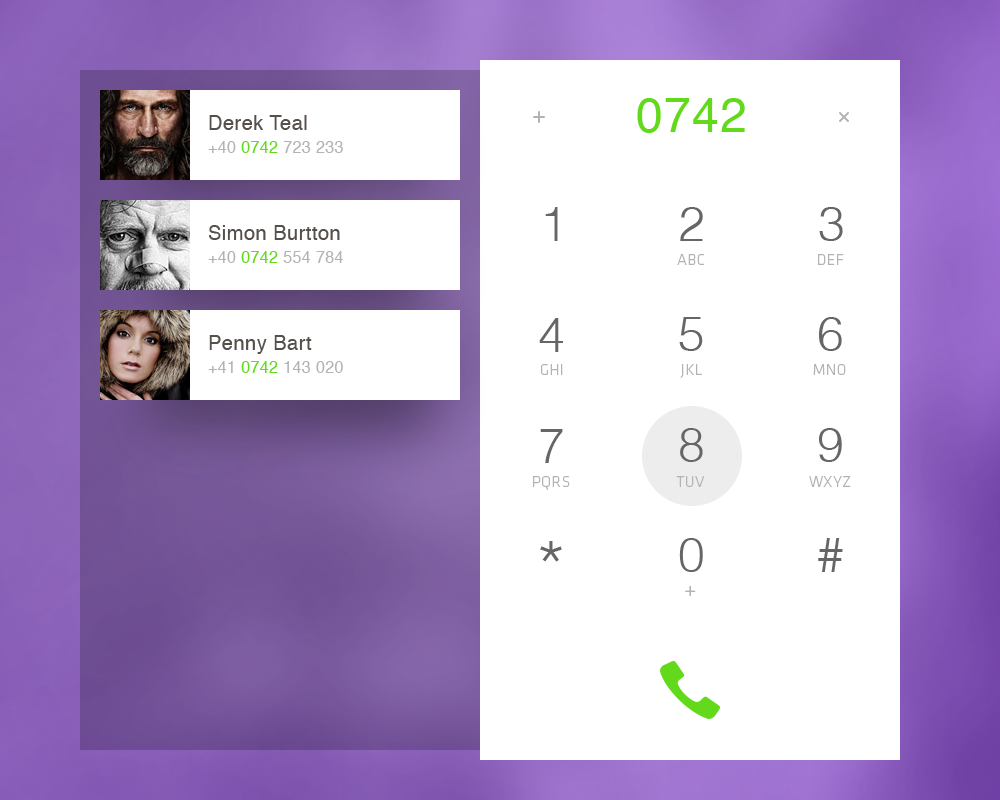
<style>
.page{position:relative;width:1000px;height:800px;background:#ffffff}
.page>*{position:absolute;margin:0}
.t1{font:48px "Helvetica";letter-spacing:0.025em;color:#63d91c;text-transform:uppercase}
.t2{font:20px "Helvetica";letter-spacing:0.025em;color:#55504a}
.t3{font:16px "Helvetica";letter-spacing:0.025em;color:#b3b3b3;text-transform:uppercase}
.t4{font:16px "Helvetica";letter-spacing:0.025em;color:#63d91c;text-transform:uppercase}
.t5{font:48px "Helvetica-Light";letter-spacing:0.025em;color:#666666;text-transform:uppercase}
.t6{font:16px "KlavikaBasic-Light";letter-spacing:0.025em;color:#b3b3b3;text-transform:uppercase}
.t7{font:72px "Helvetica-Light";letter-spacing:0.025em;color:#666666;text-transform:uppercase}
.t8{font:24px "KlavikaBasic-Light";letter-spacing:0.025em;color:#b3b3b3;text-transform:uppercase}
</style>
<div class="page">
<p class="t1" style="left:637px;top:98px;width:108px;height:35px">0742</p>
<p class="t2" style="left:209px;top:115px;width:98px;height:15px">Derek Teal</p>
<p class="t3" style="left:208px;top:141px;width:135px;height:12px">+40 <span class="t4">0742 </span>723 233</p>
<p class="t5" style="left:545px;top:207px;width:13px;height:34px">1</p>
<p class="t5" style="left:680px;top:207px;width:23px;height:34px">2</p>
<p class="t5" style="left:819px;top:207px;width:24px;height:34px">3</p>
<p class="t2" style="left:209px;top:225px;width:131px;height:15px">Simon Burtton</p>
<p class="t3" style="left:208px;top:251px;width:135px;height:12px">+40 <span class="t4">0742 </span>554 784</p>
<p class="t6" style="left:677px;top:254px;width:28px;height:11px">ABC</p>
<p class="t6" style="left:818px;top:254px;width:26px;height:11px">DEF</p>
<p class="t5" style="left:539px;top:318px;width:24px;height:34px">4</p>
<p class="t5" style="left:679px;top:317px;width:24px;height:34px">5</p>
<p class="t5" style="left:819px;top:317px;width:23px;height:34px">6</p>
<p class="t2" style="left:209px;top:335px;width:103px;height:19px">Penny Bart</p>
<p class="t3" style="left:208px;top:361px;width:135px;height:12px">+41 <span class="t4">0742 </span>143 020</p>
<p class="t6" style="left:541px;top:364px;width:22px;height:11px">GHI</p>
<p class="t6" style="left:680px;top:364px;width:22px;height:14px">JKL</p>
<p class="t6" style="left:813px;top:364px;width:33px;height:11px">MNO</p>
<p class="t5" style="left:540px;top:429px;width:23px;height:34px">7</p>
<p class="t5" style="left:680px;top:428px;width:23px;height:34px">8</p>
<p class="t5" style="left:819px;top:428px;width:23px;height:34px">9</p>
<p class="t6" style="left:533px;top:476px;width:37px;height:14px">PQRS</p>
<p class="t6" style="left:676px;top:476px;width:29px;height:11px">TUV</p>
<p class="t6" style="left:809px;top:476px;width:42px;height:11px">WXYZ</p>
<p class="t7" style="left:540px;top:541px;width:22px;height:21px">*</p>
<p class="t5" style="left:679px;top:538px;width:24px;height:34px">0</p>
<p class="t5" style="left:818px;top:538px;width:25px;height:34px">#</p>
<p class="t8" style="left:685px;top:586px;width:11px;height:10px">+</p>
</div>
